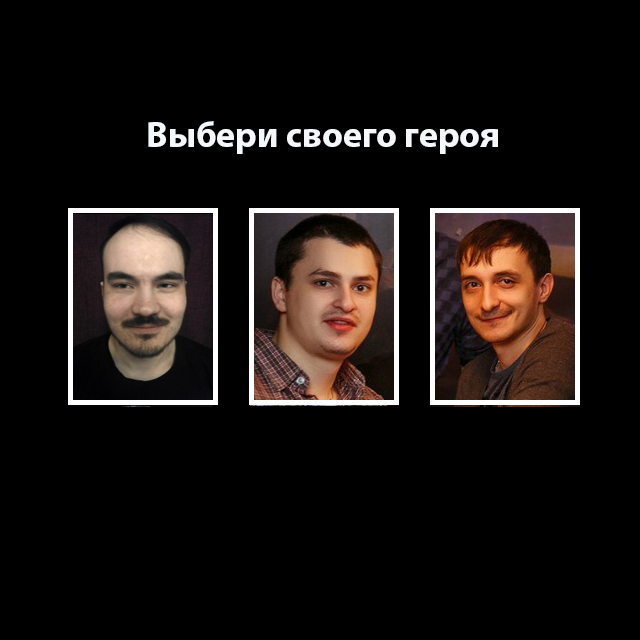
<style>
.page{position:relative;width:640px;height:640px;background:#000000}
.page>*{position:absolute;margin:0}
.t1{font:36px "MyriadPro-Bold";color:#f4f8fa}
</style>
<div class="page">
<p class="t1" style="left:148px;top:121px;width:350px;height:33px">Выбери своего героя</p>
</div>
